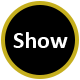
<style>
.page{position:relative;width:80px;height:80px;background:#000000}
.page>*{position:absolute;margin:0}
.t1{font:24px "Calibri-Bold";color:#ffffff}
</style>
<div class="page">
<p class="t1" style="left:13px;top:32px;width:55px;height:16px">Show</p>
</div>
